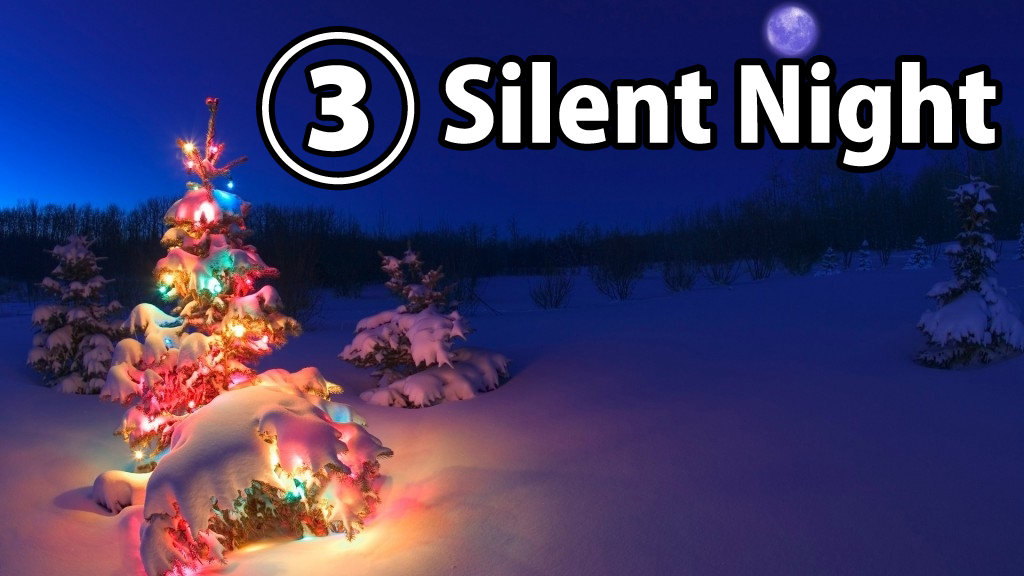
<style>
.page{position:relative;width:1024px;height:576px}
.page>*{position:absolute;margin:0}
.t1{font:160px "KozGoPr6N-Heavy";color:#ffffff}
.t2{font:100px "KozGoPr6N-Heavy";color:#ffffff}
</style>
<div class="page">
<p class="t1" style="left:262px;top:32px;width:153px;height:153px">③</p>
<p class="t2" style="left:444px;top:62px;width:552px;height:105px">Silent Night</p>
</div>
